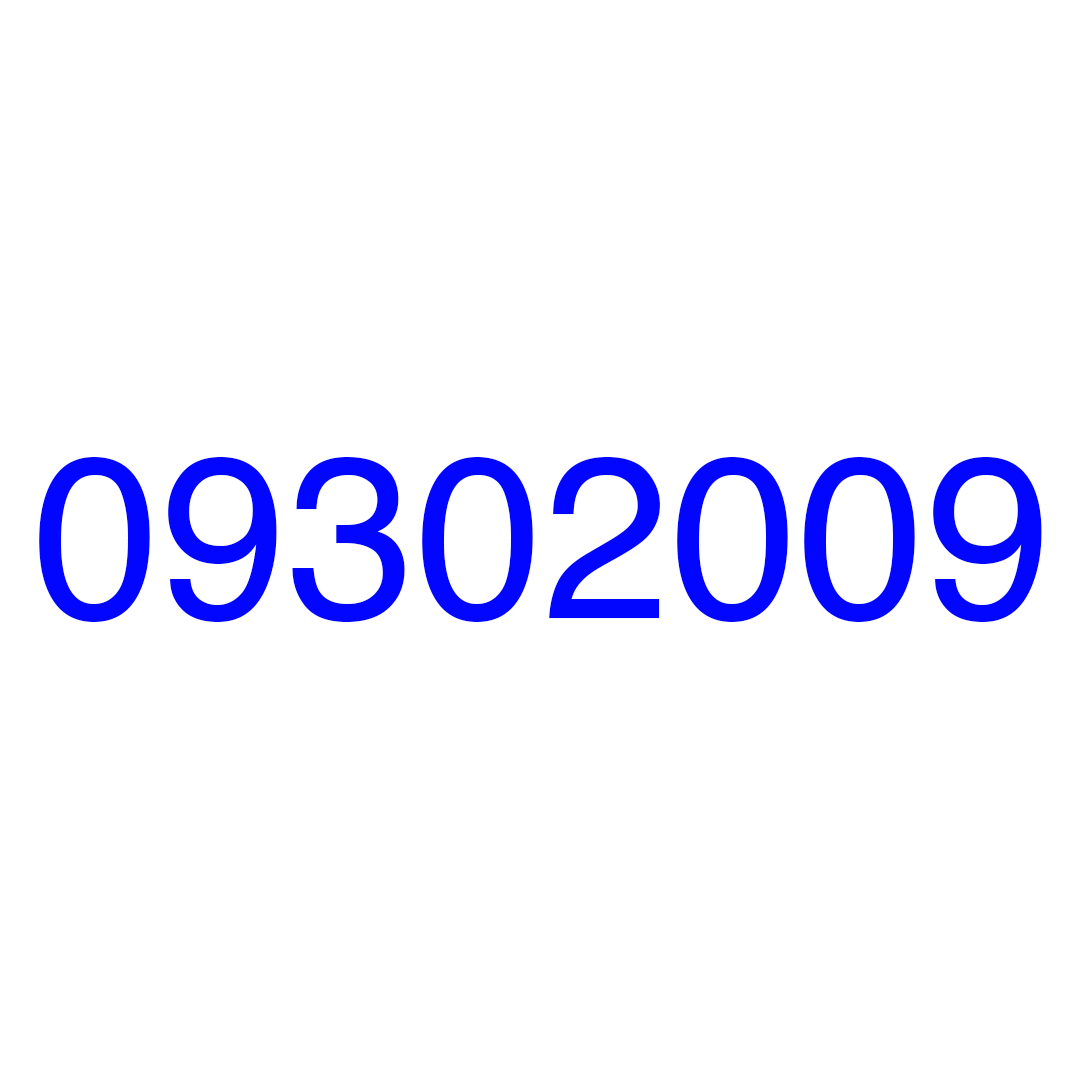
<style>
.page{position:relative;width:1080px;height:1080px;background:#ffffff}
.page>*{position:absolute;margin:0}
.t1{font:229.2px "Helvetica";color:#0206ff}
</style>
<div class="page">
<p class="t1" style="left:39px;top:457px;width:1003px;height:165px">09302009</p>
</div>
